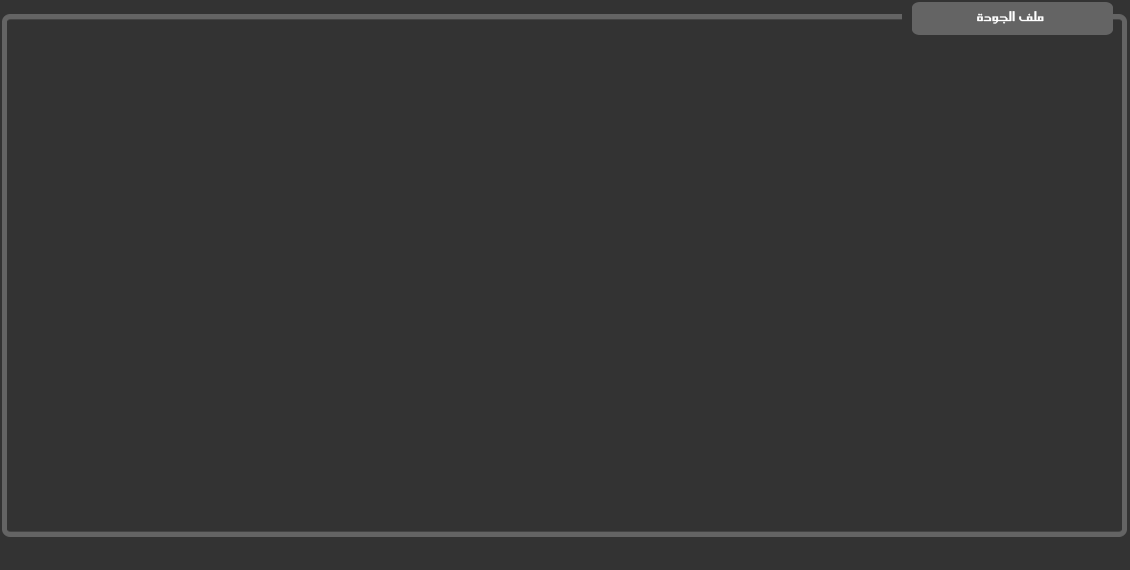
<style>
.page{position:relative;width:1130px;height:570px;background:#333333}
.page>*{position:absolute;margin:0}
.t1{font:16px "SC_KHALID";color:#fefefe;scale:1.07 1}
</style>
<div class="page">
<p class="t1" style="left:977px;top:11px;width:67px;height:13px">ملف  الجودة</p>
</div>
